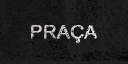
<style>
.page{position:relative;width:128px;height:64px}
.page>*{position:absolute;margin:0}
.t1{font:18.9px "ArialMT";font-weight:bold}
</style>
<div class="page">
<p class="t1" style="left:31px;top:25px;width:66px;height:18px">PRAÇA</p>
</div>
